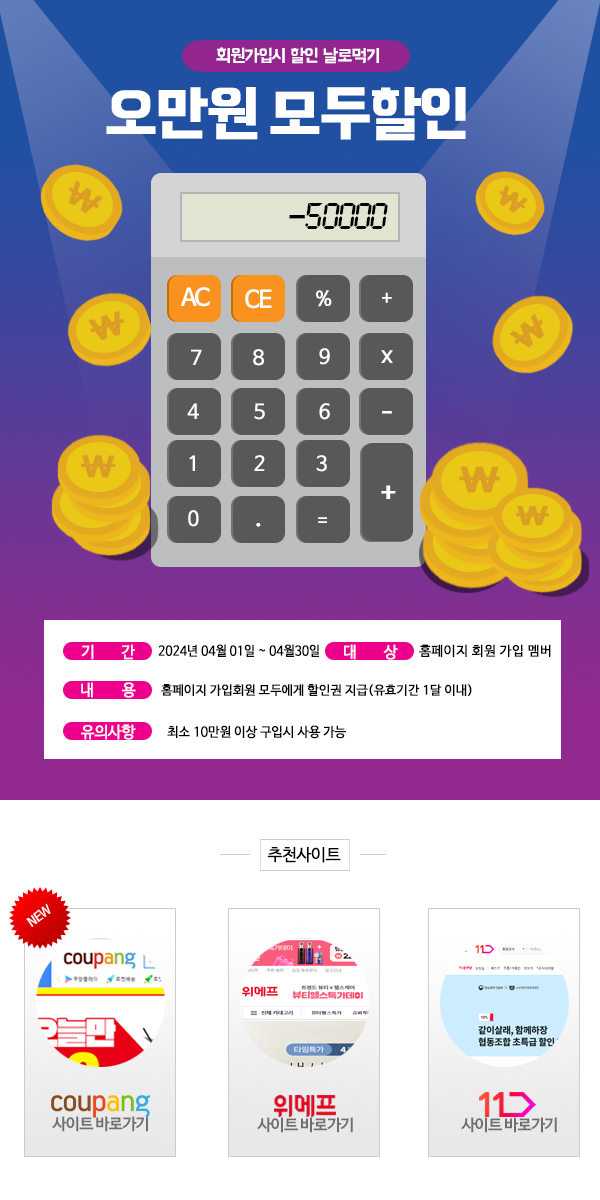
<style>
.page{position:relative;width:600px;height:1200px;background:#ffffff}
.page>*{position:absolute;margin:0}
.t1{font:18px "BMHANNAPro";letter-spacing:-0.05em;color:#ffffff}
.t2{font:61.6px "BMHANNAPro";letter-spacing:-0.05em;color:#ffffff;font-weight:bold}
.t3{font:29.3px "NanumBarunGothicBold";letter-spacing:-0.05em;color:#da9e24;font-weight:bold;scale:1.26 1}
.t4{font:24.6px "NanumBarunGothicBold";letter-spacing:-0.05em;color:#da9e24;font-weight:bold;scale:1.27 1}
.t5{font:33.3px "LCDMono2Bold";letter-spacing:-0.05em;color:#000000}
.t6{font:33.3px "NanumBarunGothicBold";letter-spacing:-0.05em;color:#000000;font-weight:bold}
.t7{font:24px "NanumBarunGothicBold";letter-spacing:-0.05em;color:#ffffff}
.t8{font:20px "NanumBarunGothic";letter-spacing:-0.05em;color:#ffffff;font-weight:bold}
.t9{font:23px "NanumBarunGothic";letter-spacing:-0.05em;color:#ffffff;font-weight:bold;scale:0.97 1}
.t10{font:20px "NanumBarunGothicBold";letter-spacing:-0.05em;color:#ffffff;font-weight:bold}
.t11{font:34.4px "NanumBarunGothicBold";letter-spacing:-0.05em;color:#da9e24;font-weight:bold;scale:1.26 1}
.t12{font:26.7px "NanumBarunGothicBold";letter-spacing:-0.05em;color:#ffffff;font-weight:bold}
.t13{font:25.5px "NanumBarunGothicBold";letter-spacing:-0.05em;color:#da9e24;font-weight:bold;scale:1.39 1}
.t14{font:20px "NanumBarunGothicBold";letter-spacing:-0.05em;color:#fffefe;font-weight:bold}
.t15{font:15.7px "NanumBarunGothic";letter-spacing:1.71em;color:#ffffff;font-weight:bold}
.t16{font:15.7px "NanumBarunGothic";letter-spacing:1.79em;color:#ffffff;font-weight:bold}
.t17{font:13.3px "NanumBarunGothic";color:#000000;font-weight:bold;scale:0.9 1}
.t18{font:13.3px "NanumBarunGothic";color:#000000;font-weight:bold}
.t19{font:12.4px "NanumBarunGothic";color:#000000;font-weight:bold}
.t20{font:15.7px "NanumBarunGothic";letter-spacing:-0.025em;color:#ffffff;font-weight:bold}
.t21{font:13.3px "NanumBarunGothic";color:#000000;font-weight:bold;scale:0.93 1}
.t22{font:16.8px "NanumBarunGothic";letter-spacing:-0.05em;color:#000000;font-weight:bold}
.t23{font:12.5px "NanumBarunGothicBold";letter-spacing:-0.05em;color:#ffffff}
.t24{font:16px "NanumBarunGothicBold";letter-spacing:-0.05em;color:#6f6f6f}
.t25{font:16.1px "NanumBarunGothicBold";letter-spacing:-0.05em;color:#6f6f6f}
</style>
<div class="page">
<p class="t1" style="left:216px;top:47px;width:163px;height:17px">회원가입시 할인 날로먹기</p>
<p class="t2" style="left:106px;top:87px;width:360px;height:54px">오만원 모두할인</p>
<p class="t3" style="left:68px;top:180px;width:35px;height:33px;rotate:33deg">\</p>
<p class="t4" style="left:499px;top:185px;width:30px;height:28px;rotate:33deg">\</p>
<p class="t5" style="left:289px;top:203px;width:99px;height:26px"><span class="t6">-</span>50000</p>
<p class="t7" style="left:180px;top:287px;width:30px;height:20px">AC</p>
<p class="t7" style="left:245px;top:289px;width:27px;height:20px">CE</p>
<p class="t8" style="left:316px;top:290px;width:16px;height:17px">%</p>
<p class="t8" style="left:382px;top:292px;width:10px;height:11px">+</p>
<p class="t3" style="left:88px;top:311px;width:36px;height:29px;rotate:-17deg">\</p>
<p class="t3" style="left:510px;top:313px;width:34px;height:35px;rotate:-39deg">\</p>
<p class="t8" style="left:191px;top:349px;width:11px;height:16px">7</p>
<p class="t8" style="left:253px;top:349px;width:11px;height:17px">8</p>
<p class="t8" style="left:319px;top:348px;width:11px;height:17px">9</p>
<p class="t9" style="left:381px;top:350px;width:12px;height:13px">x</p>
<p class="t8" style="left:187px;top:403px;width:12px;height:16px">4</p>
<p class="t8" style="left:254px;top:403px;width:11px;height:17px">5</p>
<p class="t8" style="left:319px;top:403px;width:11px;height:17px">6</p>
<p class="t10" style="left:382px;top:411px;width:10px;height:3px">-</p>
<p class="t3" style="left:81px;top:455px;width:35px;height:23px">\</p>
<p class="t8" style="left:189px;top:455px;width:6px;height:16px">1</p>
<p class="t8" style="left:254px;top:455px;width:11px;height:16px">2</p>
<p class="t8" style="left:316px;top:455px;width:11px;height:17px">3</p>
<p class="t11" style="left:459px;top:466px;width:41px;height:27px">\</p>
<p class="t12" style="left:381px;top:485px;width:15px;height:14px">+</p>
<p class="t8" style="left:188px;top:510px;width:11px;height:17px">0</p>
<p class="t13" style="left:516px;top:506px;width:33px;height:20px">\</p>
<p class="t8" style="left:318px;top:517px;width:9px;height:6px">=</p>
<p class="t14" style="left:256px;top:523px;width:5px;height:4px">.</p>
<p class="t15" style="left:81px;top:644px;width:54px;height:16px">기<span class="t16">간</span></p>
<p class="t17" style="left:158px;top:644px;width:161px;height:13px">2024년 04월 01일 ~ 04월30일</p>
<p class="t15" style="left:344px;top:644px;width:54px;height:16px">대상</p>
<p class="t18" style="left:419px;top:644px;width:132px;height:13px">홈페이지 회원 가입 멤버</p>
<p class="t16" style="left:81px;top:682px;width:55px;height:16px">내용</p>
<p class="t19" style="left:161px;top:684px;width:311px;height:12px">홈페이지 가입회원 모두에게 할인권 지급(유효기간 1달 이내)</p>
<p class="t20" style="left:81px;top:724px;width:55px;height:16px">유의사<span class="t15">항</span></p>
<p class="t21" style="left:167px;top:725px;width:179px;height:14px">최소 10만원 이상 구입시 사용 가능</p>
<p class="t22" style="left:267px;top:847px;width:74px;height:16px">추천사이트</p>
<p class="t23" style="left:26px;top:903px;width:25px;height:24px;rotate:-36deg">NEW</p>
<p class="t24" style="left:52px;top:1116px;width:96px;height:16px">사이트 바로가기</p>
<p class="t25" style="left:257px;top:1117px;width:96px;height:16px">사이트 바로가기</p>
<p class="t25" style="left:461px;top:1117px;width:96px;height:16px">사이트 바로가기</p>
</div>
